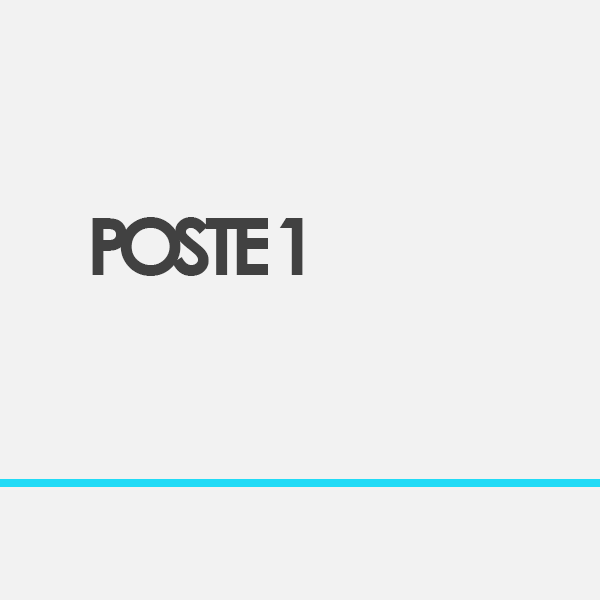
<style>
.page{position:relative;width:600px;height:600px;background:#f2f2f2}
.page>*{position:absolute;margin:0}
.t1{font:80px "CenturyGothic-Bold";letter-spacing:-0.1em;color:#414141}
.t2{font:80px "CenturyGothic-Bold";letter-spacing:0.14em;color:#414141}
</style>
<div class="page">
<p class="t1" style="left:92px;top:217px;width:211px;height:59px">POSTE<span class="t2">1</span></p>
</div>
